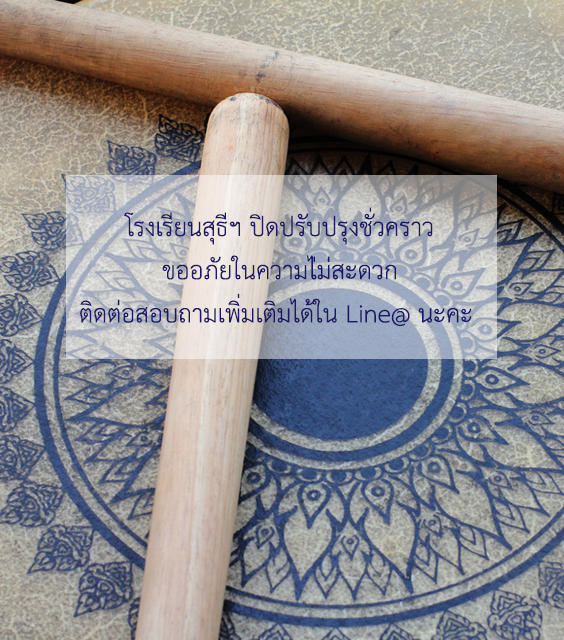
<style>
.page{position:relative;width:564px;height:640px}
.page>*{position:absolute;margin:0}
.t1{font:36px "THSarabunPSK";color:#1b1763}
</style>
<div class="page">
<p class="t1" style="left:80px;top:207px;width:392px;height:119px;text-align:center">โรงเรียนสุธีฯ ปิดปรับปรุงชั่วคราว<br>ขออภัยในความไ่ม่สะดวก<br>ติดต่อสอบถามเพิ่มเติมได้ใน Line@ นะคะ</p>
</div>
